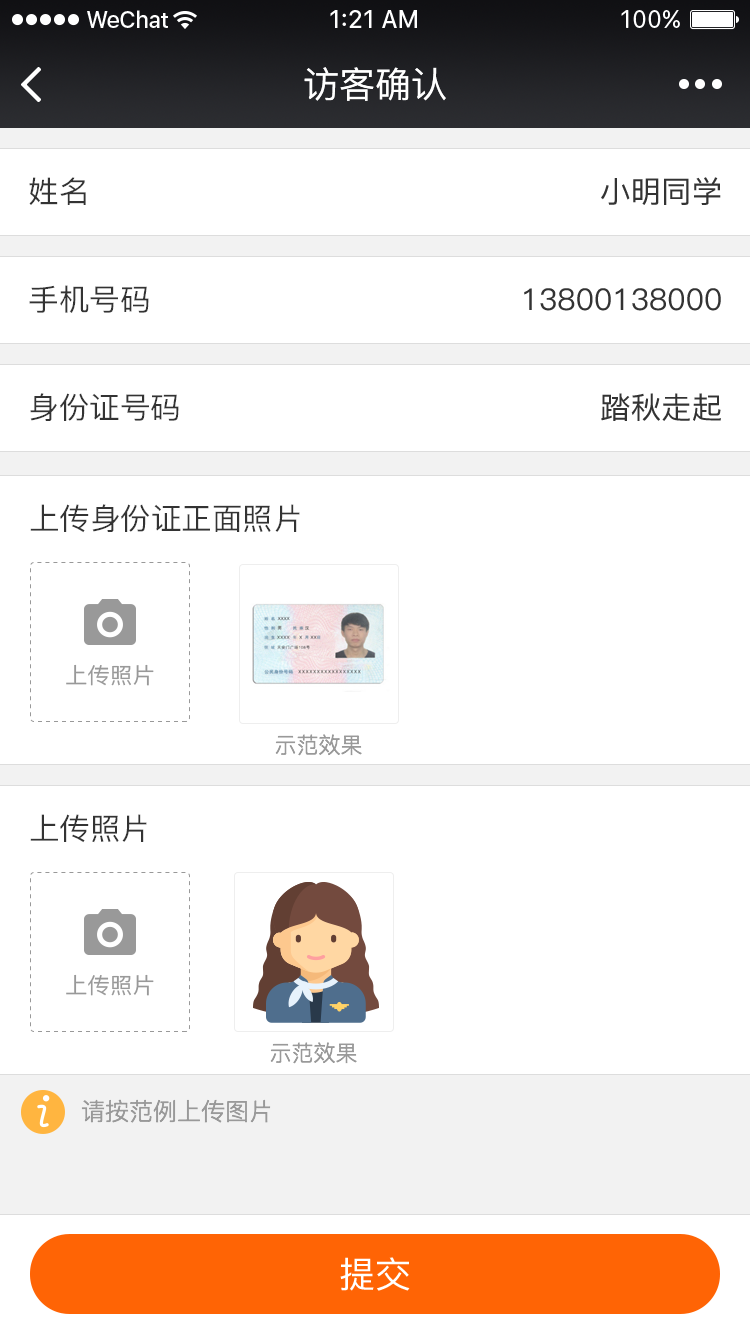
<style>
.page{position:relative;width:750px;height:1334px;background:#ffffff}
.page>*{position:absolute;margin:0}
.t1{font:36px "PingFang-SC-Medium";color:#ffffff}
.t2{font:30px "PingFangSC-Regular";color:#333333}
.t3{font:30px "PingFang-SC-Medium";color:#333333}
.t4{font:29.9px "PingFangSC-Regular";color:#333333}
.t5{font:22px "PingFang-SC-Medium";color:#999999}
.t6{font:22px "PingFangSC-Light";color:#999999}
.t7{font:24px "PingFangSC-Light";color:#999999}
</style>
<div class="page">
<p class="t1" style="left:304px;top:67px;width:142px;height:34px">访客确认</p>
<p class="t2" style="left:29px;top:177px;width:57px;height:28px">姓名</p>
<p class="t3" style="left:601px;top:177px;width:120px;height:28px">小明同学</p>
<p class="t2" style="left:29px;top:285px;width:120px;height:28px">手机号码</p>
<p class="t3" style="left:524px;top:288px;width:197px;height:23px">13800138000</p>
<p class="t2" style="left:30px;top:393px;width:149px;height:28px">身份证号码</p>
<p class="t3" style="left:601px;top:393px;width:120px;height:28px">踏秋走起</p>
<p class="t4" style="left:30px;top:504px;width:270px;height:29px">上传身份证正面照片</p>
<p class="t5" style="left:66px;top:664px;width:88px;height:22px">上传照片</p>
<p class="t6" style="left:275px;top:734px;width:87px;height:22px">示范效果</p>
<p class="t4" style="left:30px;top:814px;width:117px;height:29px">上传照片</p>
<p class="t5" style="left:66px;top:974px;width:88px;height:22px">上传照片</p>
<p class="t6" style="left:270px;top:1042px;width:87px;height:22px">示范效果</p>
<p class="t7" style="left:81px;top:1099px;width:190px;height:24px">请按范例上传图片</p>
<p class="t1" style="left:340px;top:1257px;width:70px;height:34px">提交</p>
</div>
